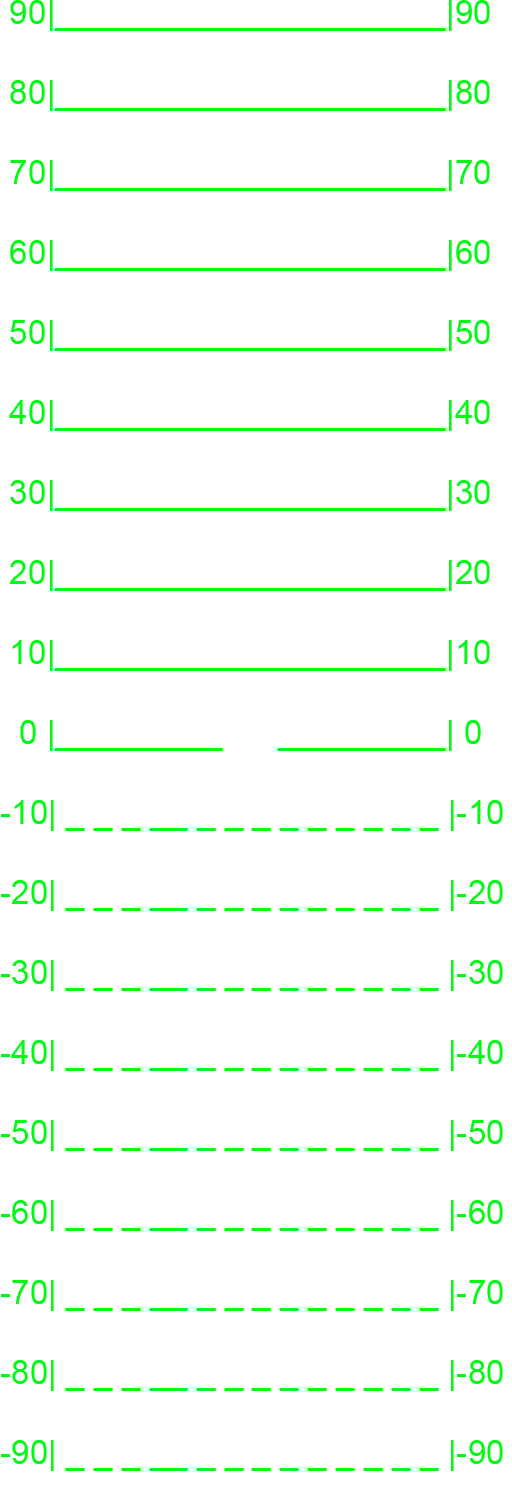
<style>
.page{position:relative;width:512px;height:1500px;background:#ffffff}
.page>*{position:absolute;margin:0}
.t1{font:33.3px "ArialMT";color:#03f913}
</style>
<div class="page">
<p class="t1" style="left:1px;top:0px;width:502px;height:1471px">90|_____________________|90<br><br> 80|_____________________|80<br><br> 70|_____________________|70<br><br> 60|_____________________|60<br><br> 50|_____________________|50<br><br> 40|_____________________|40<br><br> 30|_____________________|30<br><br> 20|_____________________|20<br><br> 10|_____________________|10<br><br>  0 |_________      _________| 0<br><br>-10| _ _ _ __ _ _ _ _ _ _ _ _ _ |-10<br><br>-20| _ _ _ __ _ _ _ _ _ _ _ _ _ |-20<br><br>-30| _ _ _ __ _ _ _ _ _ _ _ _ _ |-30<br><br>-40| _ _ _ __ _ _ _ _ _ _ _ _ _ |-40<br><br>-50| _ _ _ __ _ _ _ _ _ _ _ _ _ |-50<br><br>-60| _ _ _ __ _ _ _ _ _ _ _ _ _ |-60<br><br>-70| _ _ _ __ _ _ _ _ _ _ _ _ _ |-70<br><br>-80| _ _ _ __ _ _ _ _ _ _ _ _ _ |-80<br><br>-90| _ _ _ __ _ _ _ _ _ _ _ _ _ |-90</p>
</div>
